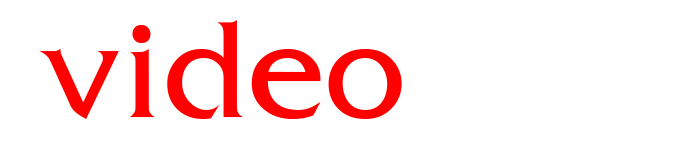
<style>
.page{position:relative;width:700px;height:150px;background:#ffffff}
.page>*{position:absolute;margin:0}
.t1{font:125px "FrizQuadrataFont";color:#ff0000}
.t2{font:125px "FrizQuadrataFont";color:#ffffff}
</style>
<div class="page">
<p class="t1" style="left:39px;top:20px;width:604px;height:127px">video<span class="t2">pad</span></p>
</div>
